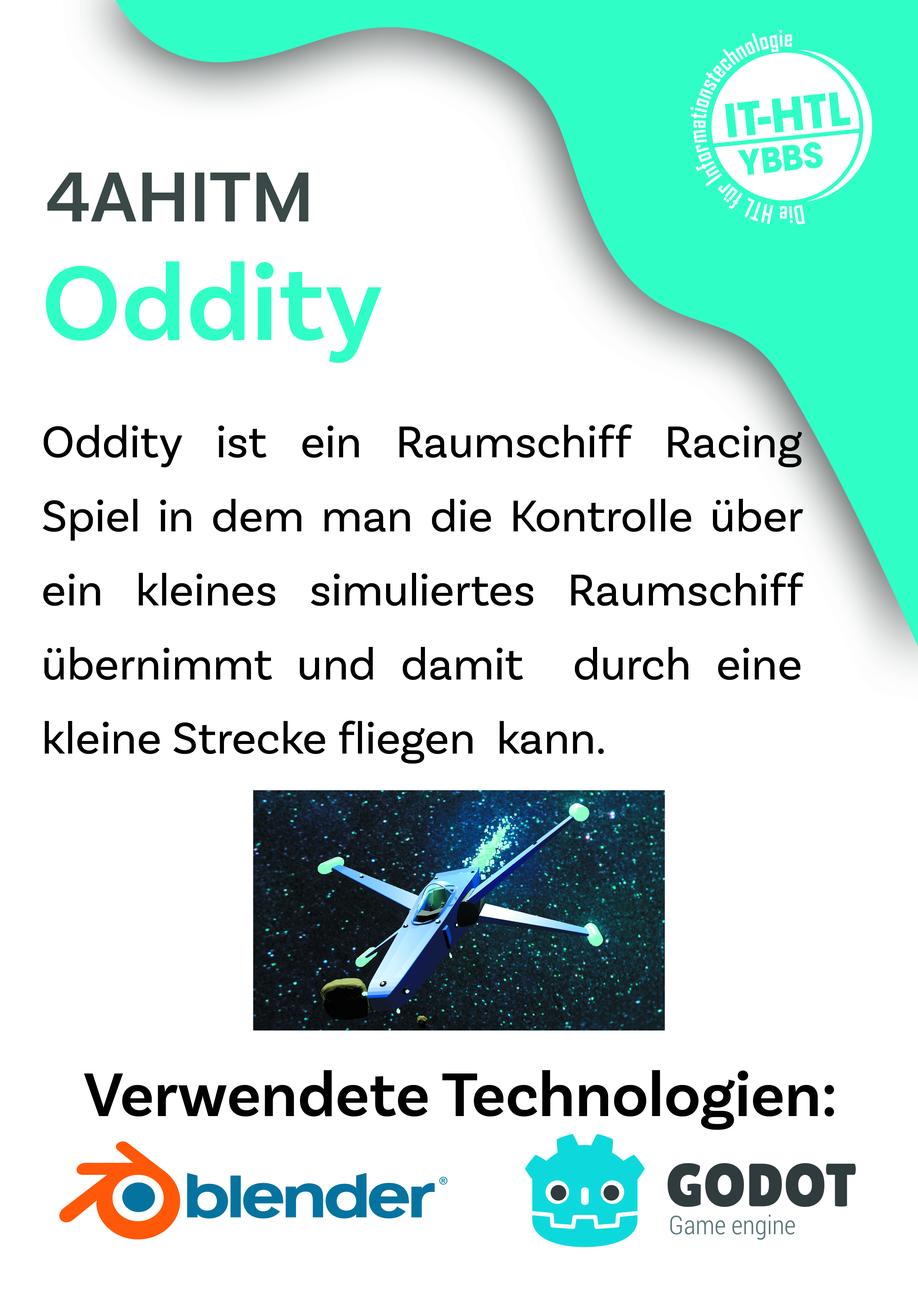
<style>
.page{position:relative;width:918px;height:1299px;background:#ffffff}
.page>*{position:absolute;margin:0}
.t1{font:74px "BasicSans-SemiBold";color:#3a4a48}
.t2{font:111.1px "BasicSans-SemiBold";color:#30fec7}
.t3{font:46.3px/74px "BasicSans-Regular";color:#000000}
.t4{font:64.8px "BasicSans-SemiBold";color:#000000}
</style>
<div class="page">
<p class="t1" style="left:47px;top:173px;width:261px;height:49px">4AHITM</p>
<p class="t2" style="left:46px;top:261px;width:336px;height:102px">Oddity</p>
<p class="t3" style="left:43px;top:424px;width:761px;height:340px;text-align:justify">Oddity ist ein Raumschiff Racing Spiel in dem man die Kontrolle über ein kleines simuliertes Raumschiff übernimmt und damit  durch eine kleine Strecke fliegen  kann.</p>
<p class="t4" style="left:84px;top:1070px;width:750px;height:60px">Verwendete Technologien:</p>
</div>
